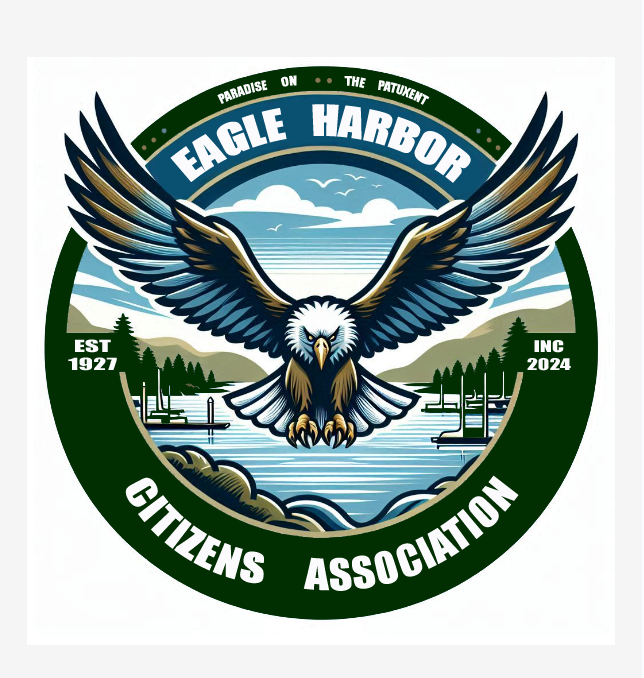
<style>
.page{position:relative;width:644px;height:678px;background:#f5f5f5}
.page>*{position:absolute;margin:0}
.t1{font:12.4px "Impact";color:#fbfbfe}
.t2{font:39.9px "Impact";color:#fbfbfe}
.t3{font:15.6px "Impact";color:#fbfbfe;scale:1.71 1}
.t4{font:15.1px "Impact";color:#fbfbfe;scale:1.46 1}
.t5{font:39.9px "Impact";color:#fbfbfe;scale:0.97 1}
</style>
<div class="page">
<p class="t1" style="left:281px;top:75px;width:16px;height:12px;rotate:-8deg">ON</p>
<p class="t1" style="left:344px;top:76px;width:22px;height:13px;rotate:7deg">THE</p>
<p class="t1" style="left:217px;top:80px;width:51px;height:24px;rotate:-17deg">PARADISE</p>
<p class="t1" style="left:378px;top:80px;width:52px;height:25px;rotate:19deg">PATUXENT</p>
<p class="t2" style="left:170px;top:104px;width:301px;height:79px">EAGLE   HARBOR</p>
<p class="t3" style="left:68px;top:339px;width:49px;height:32px;text-align:center">EST<br>1927</p>
<p class="t4" style="left:527px;top:340px;width:44px;height:31px;text-align:center">INC<br>2024</p>
<p class="t2" style="left:125px;top:477px;width:139px;height:107px;rotate:34deg">CITIZENS</p>
<p class="t5" style="left:303px;top:475px;width:216px;height:116px;rotate:-24deg">ASSOCIATION</p>
</div>
